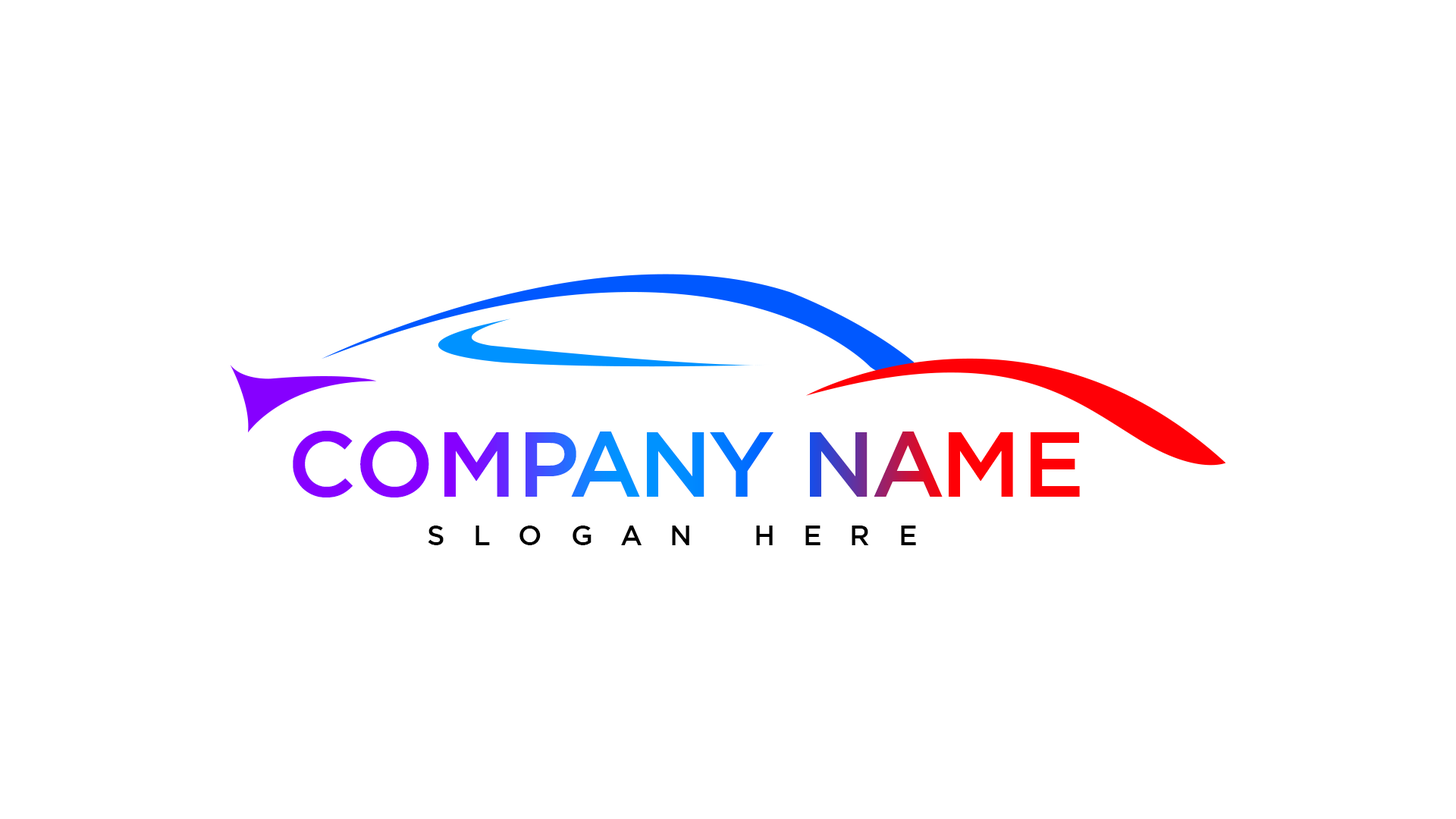
<style>
.page{position:relative;width:1456px;height:819px;background:#ffffff}
.page>*{position:absolute;margin:0}
.t1{font:92.8px "Gotham-Medium"}
.t2{font:28.2px "Gotham-Medium";letter-spacing:1em;color:#000000}
</style>
<div class="page">
<p class="t1" style="left:293px;top:431px;width:787px;height:66px">COMPANY NAME</p>
<p class="t2" style="left:428px;top:526px;width:488px;height:19px">SLOGAN HERE</p>
</div>
